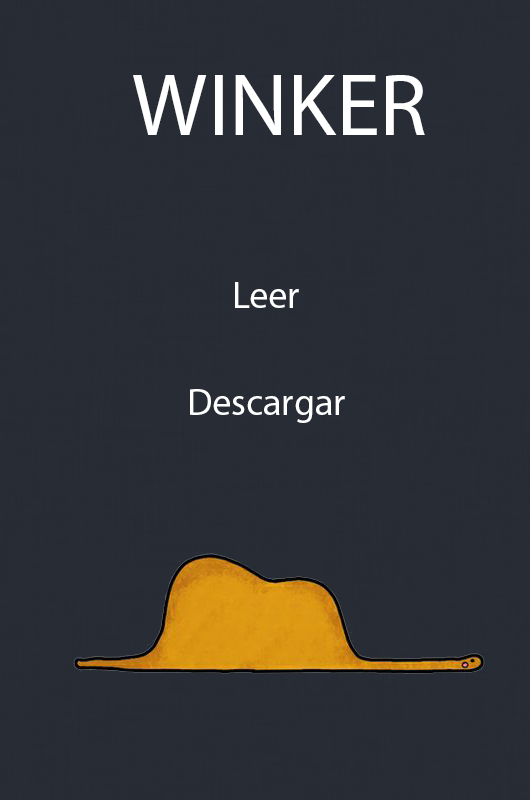
<style>
.page{position:relative;width:530px;height:800px;background:#272c35}
.page>*{position:absolute;margin:0}
.t1{font:88.9px "MyriadPro-Regular";color:#ffffff}
.t2{font:37.9px "MyriadPro-Regular";color:#ffffff}
</style>
<div class="page">
<p class="t1" style="left:133px;top:75px;width:292px;height:60px">WINKER</p>
<p class="t2" style="left:235px;top:282px;width:64px;height:26px">Leer</p>
<p class="t2" style="left:190px;top:389px;width:155px;height:34px">Descargar</p>
</div>
